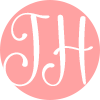
<style>
.page{position:relative;width:100px;height:100px;background:#ffa2a2}
.page>*{position:absolute;margin:0}
.t1{font:72px "SaturdayRegular";color:#ffffff;scale:0.93 1}
</style>
<div class="page">
<p class="t1" style="left:3px;top:12px;width:90px;height:75px">JH</p>
</div>
